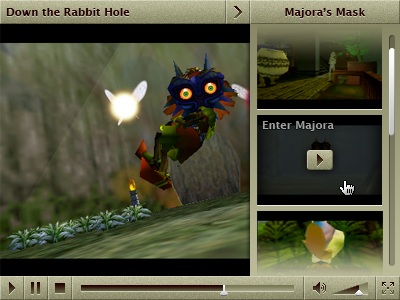
<style>
.page{position:relative;width:400px;height:300px}
.page>*{position:absolute;margin:0}
.t1{font:11px "LucidaGrande-Bold";color:#220000}
.t2{font:11px "LucidaGrande-Bold";color:#a1a2a1}
</style>
<div class="page">
<p class="t1" style="left:6px;top:8px;width:124px;height:8px">Down the Rabbit Hole</p>
<p class="t1" style="left:6px;top:8px;width:124px;height:8px">Down the Rabbit Hole</p>
<p class="t1" style="left:285px;top:8px;width:81px;height:10px">Majora’s Mask</p>
<p class="t2" style="left:262px;top:121px;width:72px;height:10px">Enter Majora</p>
</div>
